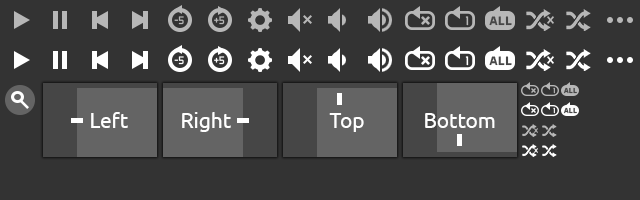
<style>
.page{position:relative;width:640px;height:200px;background:#333333}
.page>*{position:absolute;margin:0}
.t1{font:11px "AeroMaticsDisplayRegular";color:#b7b7b7}
.t2{font:12.5px "AeroMaticsDisplayRegular";color:#b7b7b7}
.t3{font:12.5px "AeroMaticsDisplayBold";letter-spacing:0.05em;color:#464646}
.t4{font:11px "AeroMaticsDisplayRegular";color:#ffffff}
.t5{font:12.5px "AeroMaticsDisplayRegular";color:#ffffff}
.t6{font:7.4px "AeroMaticsDisplayRegular";color:#b7b7b7}
.t7{font:7.4px "AeroMaticsDisplayBold";letter-spacing:0.05em;color:#464646}
.t8{font:20.8px "Ubuntu";color:#ffffff}
.t9{font:7.4px "AeroMaticsDisplayRegular";color:#ffffff}
</style>
<div class="page">
<p class="t1" style="left:174px;top:16px;width:10px;height:9px">-5</p>
<p class="t1" style="left:214px;top:16px;width:11px;height:9px">+5</p>
<p class="t2" style="left:465px;top:16px;width:4px;height:10px">1</p>
<p class="t3" style="left:489px;top:16px;width:23px;height:10px">ALL</p>
<p class="t4" style="left:174px;top:56px;width:10px;height:9px">-5</p>
<p class="t4" style="left:214px;top:56px;width:11px;height:9px">+5</p>
<p class="t5" style="left:465px;top:56px;width:4px;height:10px">1</p>
<p class="t3" style="left:489px;top:56px;width:23px;height:10px">ALL</p>
<p class="t6" style="left:553px;top:87px;width:2px;height:7px">1</p>
<p class="t7" style="left:563px;top:87px;width:14px;height:7px">ALL</p>
<p class="t8" style="left:91px;top:112px;width:37px;height:16px">Left</p>
<p class="t8" style="left:182px;top:112px;width:49px;height:20px">Right</p>
<p class="t8" style="left:329px;top:113px;width:35px;height:19px">Top</p>
<p class="t8" style="left:425px;top:113px;width:70px;height:15px">Bottom</p>
<p class="t9" style="left:553px;top:107px;width:2px;height:7px">1</p>
<p class="t7" style="left:563px;top:107px;width:14px;height:7px">ALL</p>
</div>
